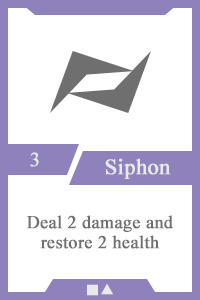
<style>
.page{position:relative;width:200px;height:300px;background:#ffffff}
.page>*{position:absolute;margin:0}
.t1{font:20px "TimesNewRomanPSMT";color:#e9e9e9;font-weight:bold}
.t2{font:22px "TimesNewRomanPSMT";color:#e9e9e9;font-weight:bold}
.t3{font:18px/20px "TimesNewRomanPSMT";color:#6f6f6f;font-weight:bold}
.t4{font:14px "AdobeHeitiStd-Regular";color:#e9e9e9;font-weight:bold}
</style>
<div class="page">
<p class="t1" style="left:30px;top:152px;width:9px;height:15px">3</p>
<p class="t2" style="left:105px;top:158px;width:66px;height:21px">Siphon</p>
<p class="t3" style="left:26px;top:215px;width:147px;height:34px;text-align:center">Deal 2 damage and restore 2 health</p>
<p class="t4" style="left:87px;top:284px;width:26px;height:12px">■▲</p>
</div>
